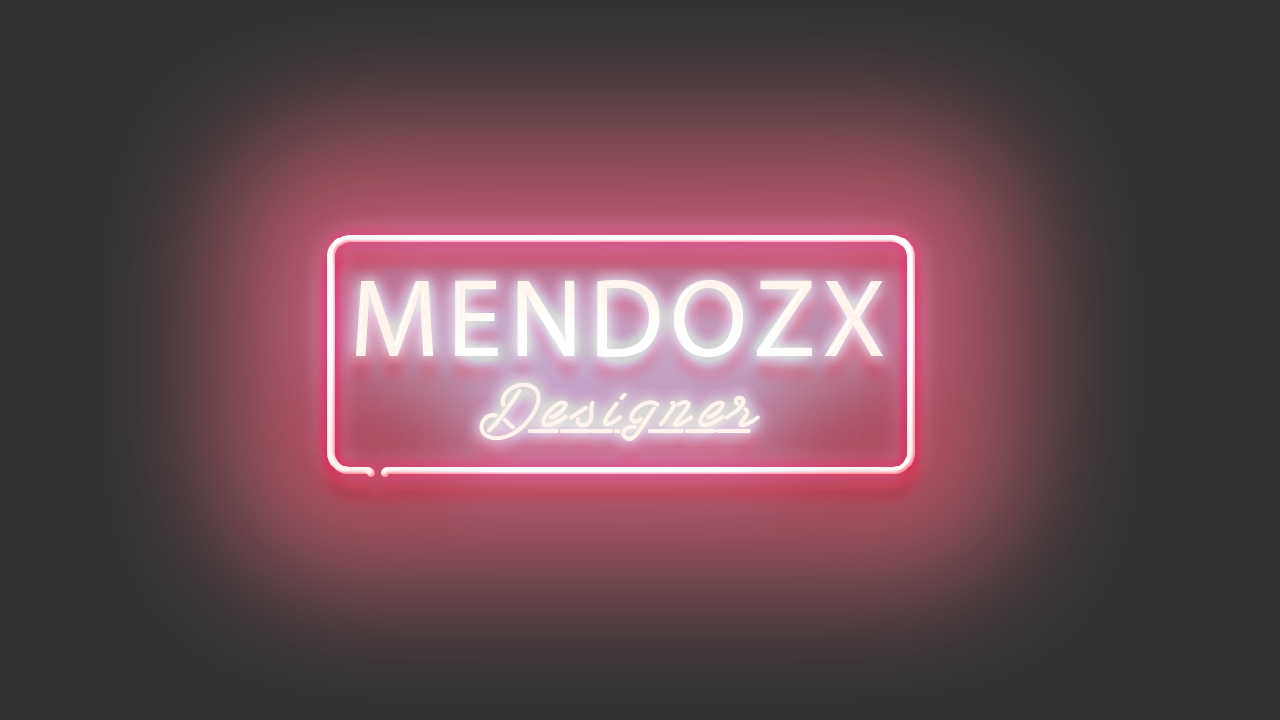
<style>
.page{position:relative;width:1280px;height:720px;background:#333333}
.page>*{position:absolute;margin:0}
.t1{font:111.8px "MyriadPro-Regular";letter-spacing:0.06em;color:#ffffff;text-transform:uppercase}
.t2{font:75.3px "LasEnterPersonalUseOnly";letter-spacing:0.06em;color:#ffffff}
</style>
<div class="page">
<p class="t1" style="left:356px;top:279px;width:527px;height:78px">Mendozx</p>
<p class="t2" style="left:479px;top:382px;width:281px;height:59px">Designer</p>
</div>
